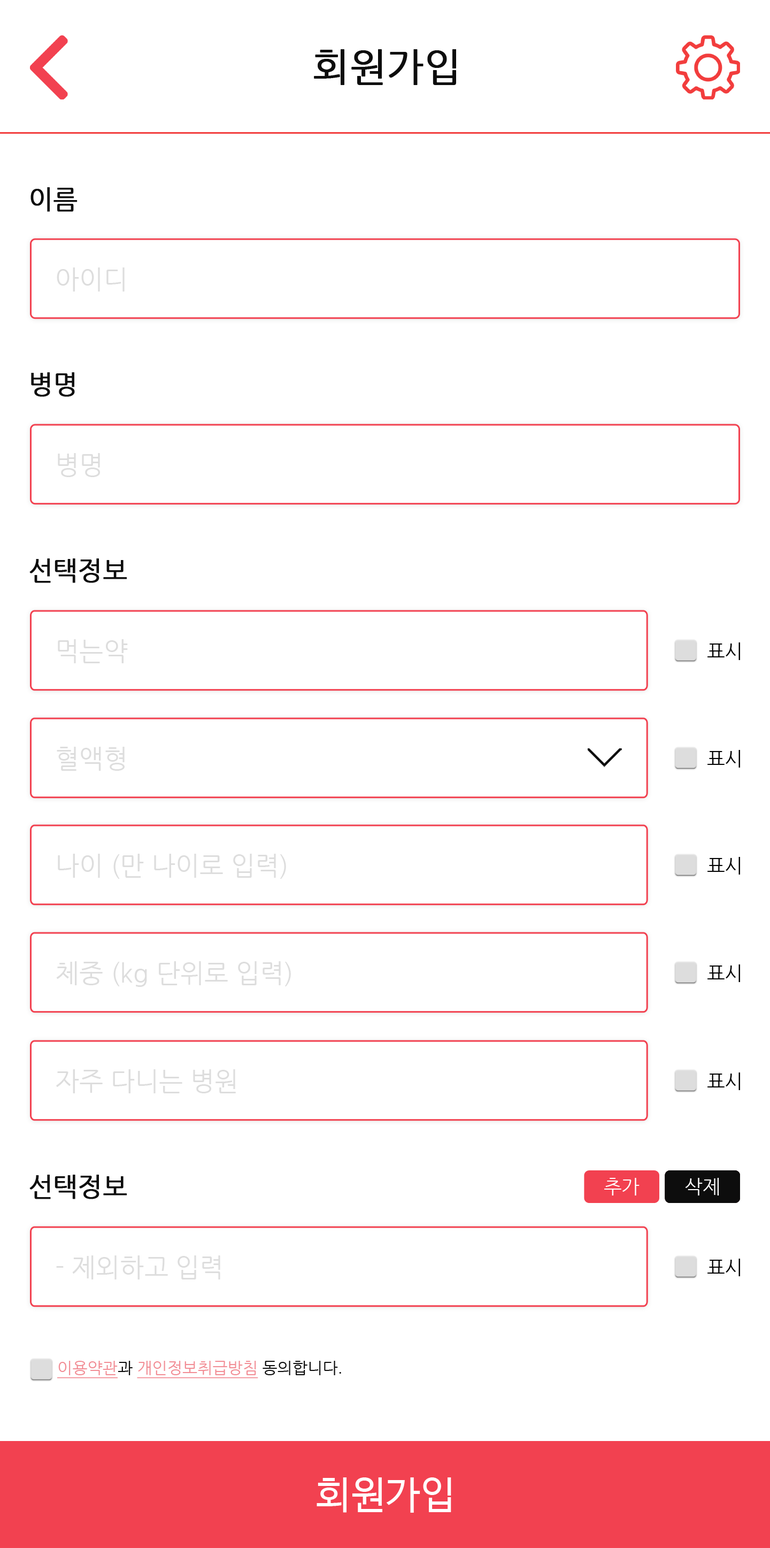
<style>
.page{position:relative;width:770px;height:1548px;background:#ffffff}
.page>*{position:absolute;margin:0}
.t1{font:38.5px "NanumGothic";color:#0d0d0d;font-weight:bold}
.t2{font:25.7px "NanumGothic";color:#0d0d0d;font-weight:bold}
.t3{font:25.7px "NanumGothic";color:#dddddd}
.t4{font:19.3px "NanumGothic";color:#030303}
.t5{font:19.3px "NanumGothic";color:#ffffff}
.t6{font:16px "NanumGothic";color:#f28d95;text-decoration:underline}
.t7{font:16px "NanumGothic";color:#0d0d0d}
.t8{font:38.5px "NanumBarunGothic";letter-spacing:0.02em;color:#ffffff}
</style>
<div class="page">
<p class="t1" style="left:314px;top:49px;width:142px;height:36px">회원가입</p>
<p class="t2" style="left:30px;top:187px;width:48px;height:25px">이름</p>
<p class="t3" style="left:57px;top:267px;width:68px;height:25px">아이디</p>
<p class="t2" style="left:31px;top:372px;width:44px;height:25px">병명</p>
<p class="t3" style="left:58px;top:453px;width:42px;height:24px">병명</p>
<p class="t2" style="left:29px;top:558px;width:98px;height:25px">선택정보</p>
<p class="t3" style="left:58px;top:639px;width:70px;height:24px">먹는약</p>
<p class="t4" style="left:708px;top:642px;width:32px;height:18px">표시</p>
<p class="t3" style="left:57px;top:747px;width:68px;height:24px">혈액형</p>
<p class="t4" style="left:708px;top:750px;width:32px;height:18px">표시</p>
<p class="t3" style="left:58px;top:854px;width:228px;height:25px">나이 (만 나이로 입력)</p>
<p class="t4" style="left:708px;top:857px;width:32px;height:18px">표시</p>
<p class="t3" style="left:56px;top:961px;width:235px;height:26px">체중 (kg 단위로 입력)</p>
<p class="t4" style="left:708px;top:964px;width:32px;height:18px">표시</p>
<p class="t3" style="left:56px;top:1069px;width:180px;height:24px">자주 다니는 병원</p>
<p class="t4" style="left:708px;top:1073px;width:32px;height:17px">표시</p>
<p class="t2" style="left:29px;top:1175px;width:98px;height:24px">선택정보</p>
<p class="t5" style="left:604px;top:1178px;width:36px;height:18px">추가</p>
<p class="t5" style="left:685px;top:1178px;width:34px;height:18px">삭제</p>
<p class="t3" style="left:56px;top:1255px;width:164px;height:25px">- 제외하고 입력</p>
<p class="t4" style="left:708px;top:1259px;width:32px;height:17px">표시</p>
<p class="t6" style="left:57px;top:1361px;width:284px;height:17px">이용약관<span class="t7">과 </span>개인정보취급방침<span class="t7"> 동의합니다.</span></p>
<p class="t8" style="left:317px;top:1477px;width:134px;height:36px">회원가입</p>
</div>
